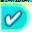
<style>
.page{position:relative;width:32px;height:32px}
.page>*{position:absolute;margin:0}
.t1{font:18px "MS-Gothic"}
</style>
<div class="page">
<p class="t1" style="left:6px;top:9px;width:15px;height:14px">✔</p>
</div>
